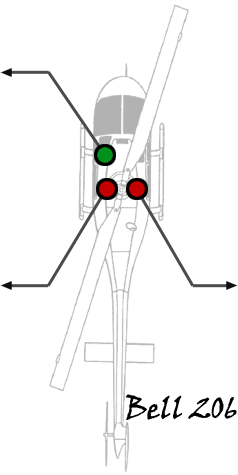
<style>
.page{position:relative;width:238px;height:475px;background:#ffffff}
.page>*{position:absolute;margin:0}
.t1{font:30px "VinerHandITC";color:#000000}
</style>
<div class="page">
<p class="t1" style="left:125px;top:394px;width:112px;height:26px">Bell 206</p>
</div>
